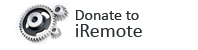
<style>
.page{position:relative;width:198px;height:50px;background:#ffffff}
.page>*{position:absolute;margin:0}
.t1{font:16px/17px "Calibri";color:#283033}
.t2{font:20px/17px "Calibri";color:#283033}
</style>
<div class="page">
<p class="t1" style="left:76px;top:10px;width:66px;height:27px">Donate to<br><span class="t2">iRemote</span></p>
</div>
